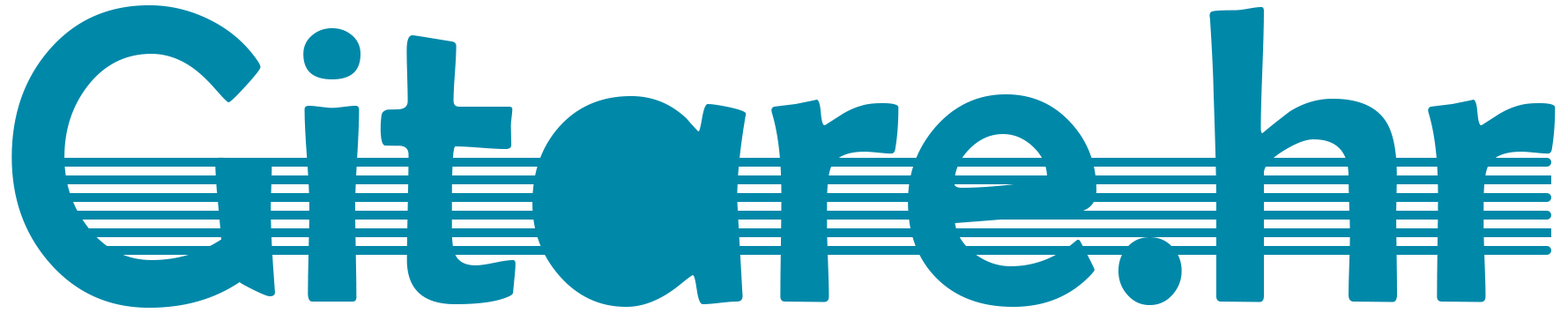
<style>
.page{position:relative;width:1568px;height:313px;background:#ffffff}
.page>*{position:absolute;margin:0}
.t1{font:423.8px "BerlinSansFB-Reg";color:#0088a9}
</style>
<div class="page">
<p class="t1" style="left:11px;top:5px;width:1545px;height:303px">Gitare.hr</p>
</div>
